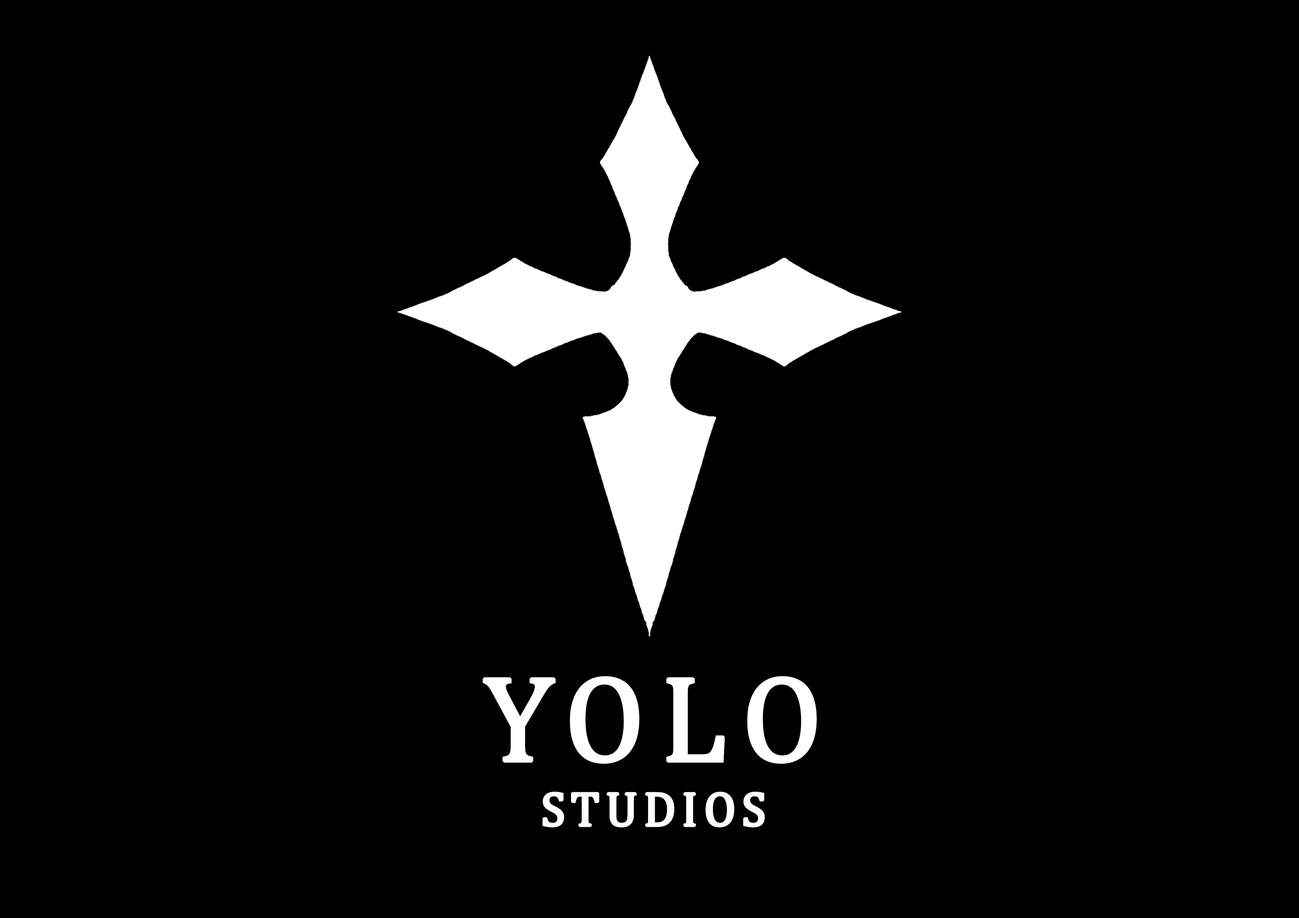
<style>
.page{position:relative;width:1299px;height:918px;background:#000000}
.page>*{position:absolute;margin:0}
.t1{font:123.4px "Cambria";letter-spacing:0.1em;color:#ffffff;font-weight:bold}
.t2{font:48.7px "Cambria";letter-spacing:0.1em;color:#ffffff;font-weight:bold}
</style>
<div class="page">
<p class="t1" style="left:482px;top:676px;width:335px;height:88px">YOLO</p>
<p class="t2" style="left:542px;top:792px;width:223px;height:36px">STUDIOS</p>
</div>
